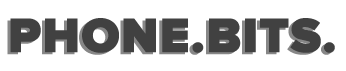
<style>
.page{position:relative;width:346px;height:71px;background:#ffffff}
.page>*{position:absolute;margin:0}
.t1{font:50px "ProximaNovaA-Black";color:#414141;font-weight:bold}
</style>
<div class="page">
<p class="t1" style="left:10px;top:18px;width:325px;height:35px">PHONE.BITS.</p>
</div>
